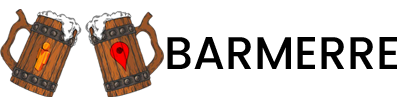
<style>
.page{position:relative;width:400px;height:102px;background:#ffffff}
.page>*{position:absolute;margin:0}
.t1{font:45.8px "Poppins-Medium";color:#000000}
</style>
<div class="page">
<p class="t1" style="left:167px;top:37px;width:230px;height:32px">BARMERRE</p>
</div>
